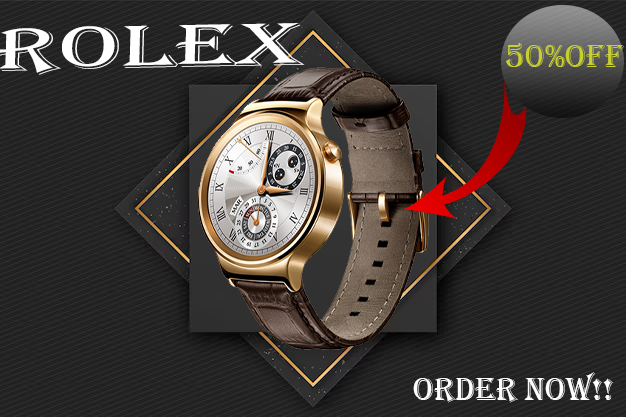
<style>
.page{position:relative;width:626px;height:417px}
.page>*{position:absolute;margin:0}
.t1{font:62.8px "Algerian";color:#ffffff;scale:1.57 1}
.t2{font:33.3px "Algerian";color:#c7cf31}
.t3{font:33.3px "Algerian";color:#ffffff}
</style>
<div class="page">
<p class="t1" style="left:0px;top:23px;width:305px;height:52px;rotate:-1deg">ROLEX</p>
<p class="t2" style="left:506px;top:43px;width:118px;height:24px">50%off</p>
<p class="t3" style="left:413px;top:372px;width:200px;height:31px">Order Now!!</p>
</div>
